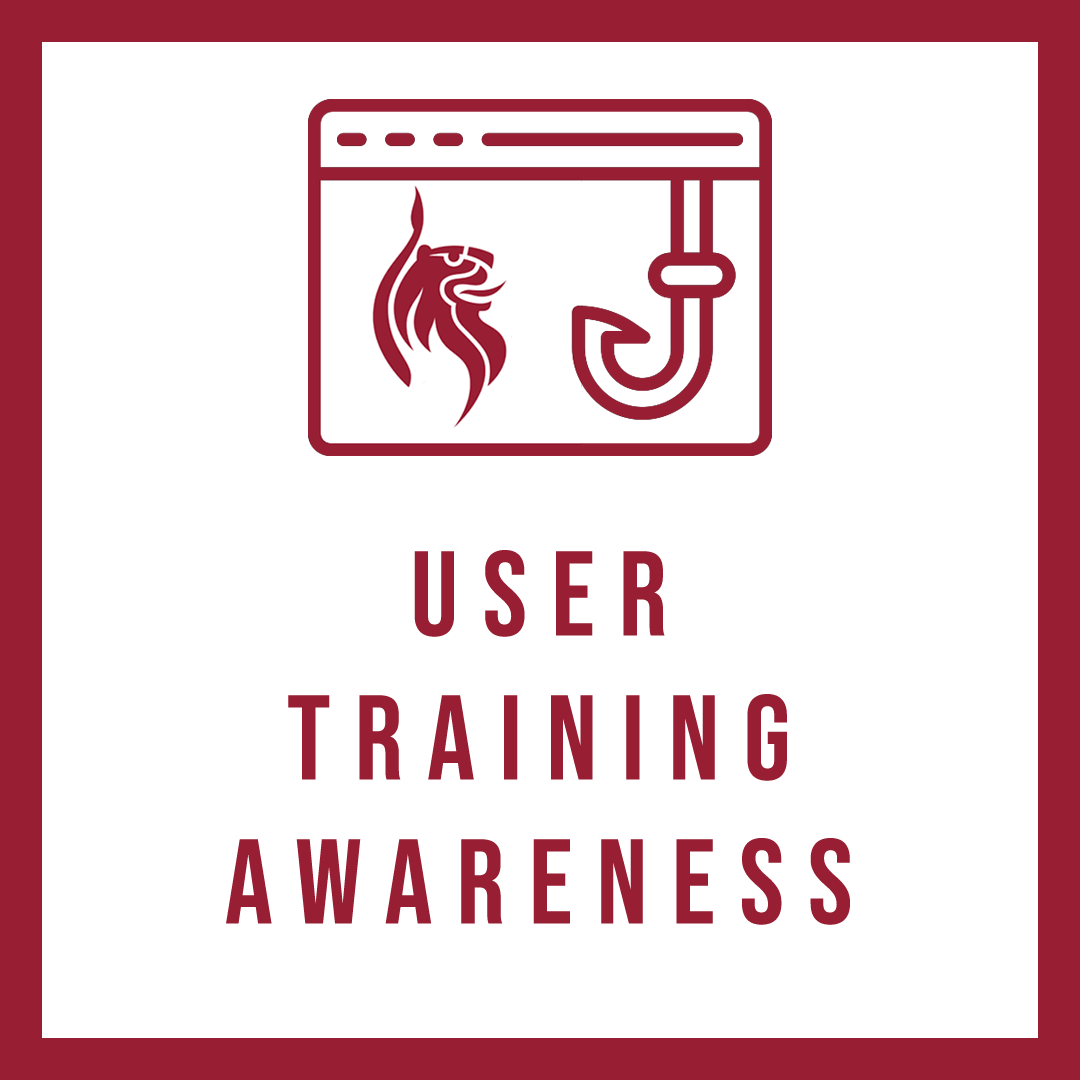
<style>
.page{position:relative;width:1080px;height:1080px;background:#ffffff}
.page>*{position:absolute;margin:0}
.t1{font:120px "BebasNeue-Regular";letter-spacing:0.2em;color:#981e33;text-transform:uppercase}
</style>
<div class="page">
<p class="t1" style="left:226px;top:550px;width:624px;height:375px;text-align:center">user<br>training<br>awareness</p>
</div>
